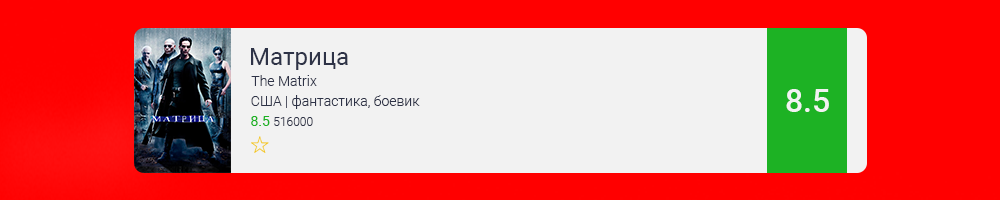
<style>
.page{position:relative;width:1000px;height:200px;background:#f2f2f2}
.page>*{position:absolute;margin:0}
.t1{font:24px "Roboto-Regular";color:#2e3347}
.t2{font:14px "Roboto-Light";color:#2e3347}
.t3{font:32px "Roboto-Medium";color:#f2f2f2}
.t4{font:12px "Roboto-Light";color:#2e3347}
.t5{font:14px "Roboto-Regular";color:#1db224}
</style>
<div class="page">
<p class="t1" style="left:251px;top:48px;width:97px;height:22px">Матрица</p>
<p class="t2" style="left:251px;top:75px;width:66px;height:11px">The Matrix</p>
<p class="t3" style="left:786px;top:89px;width:43px;height:23px">8.5</p>
<p class="t2" style="left:251px;top:95px;width:169px;height:14px">США | фантастика, боевик</p>
<p class="t4" style="left:251px;top:116px;width:62px;height:10px"><span class="t5">8.5 </span>516000</p>
</div>
